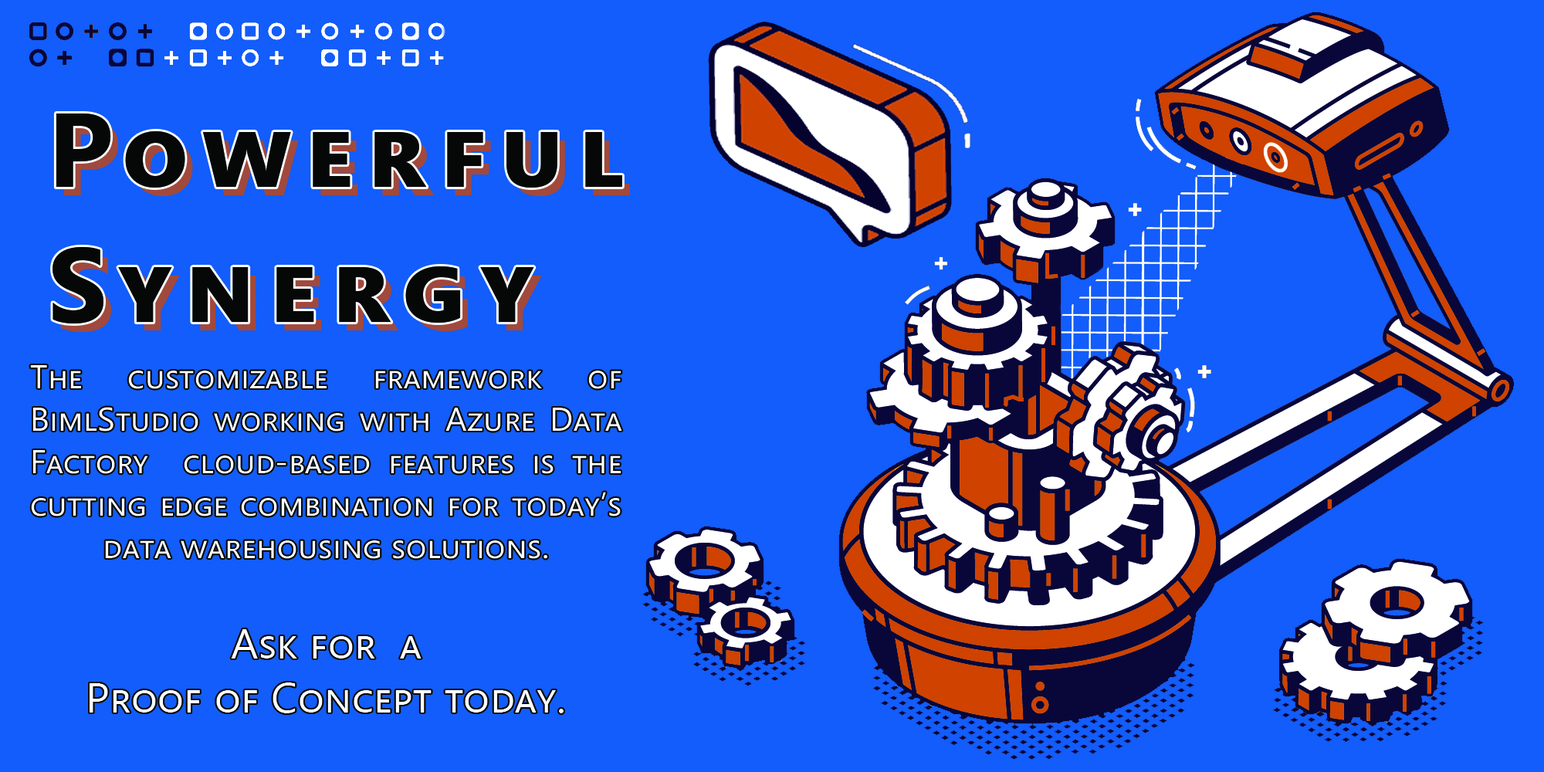
<style>
.page{position:relative;width:1544px;height:772px;background:#125dfb}
.page>*{position:absolute;margin:0}
.t1{font:104.7px "SegoeUI-Bold";letter-spacing:0.12em;color:#060808;font-variant:small-caps}
.t2{font:32.9px "SegoeUI";letter-spacing:0.01em;color:#feffff;font-variant:small-caps}
.t3{font:32.9px "SegoeUI";letter-spacing:0.09em;color:#feffff;font-variant:small-caps}
.t4{font:41.9px "SegoeUI";letter-spacing:0.01em;color:#feffff;font-variant:small-caps}
</style>
<div class="page">
<p class="t1" style="left:53px;top:114px;width:569px;height:210px">Powerful<br>Synergy</p>
<p class="t2" style="left:30px;top:365px;width:592px;height:348px;text-align:justify">The customizable framework of BimlStudio working with Azure Data Factory  cloud-based features is the cutting edge combination for today’s data warehousing solutions<span class="t3">. <br><br></span><span class="t4">Ask for  a <br>Proof of Concept today.</span></p>
</div>
